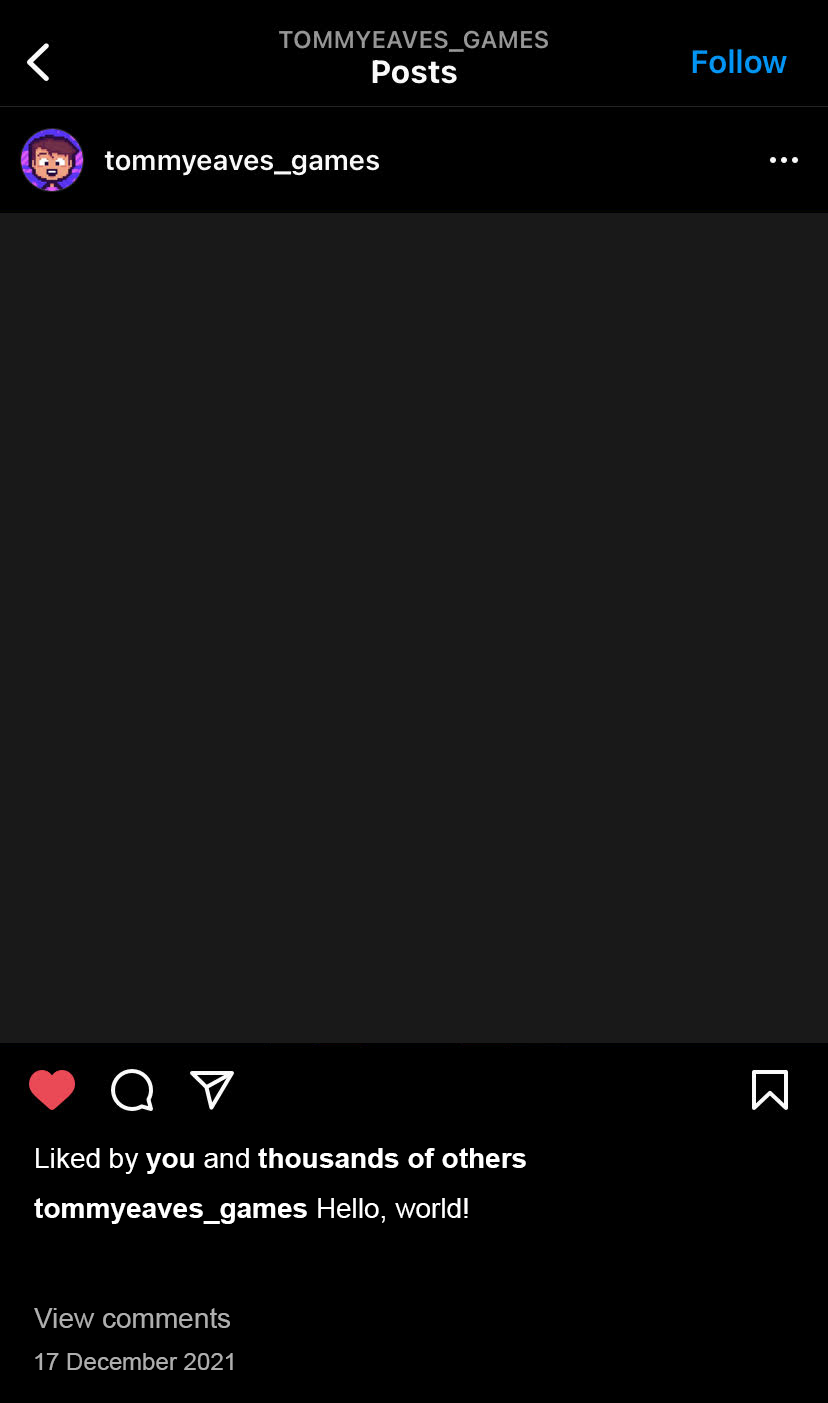
<style>
.page{position:relative;width:828px;height:1403px;background:#191919}
.page>*{position:absolute;margin:0}
.t1{font:28px "Arial-BoldMT";color:#ffffff}
.t2{font:28px "ArialMT";color:#ffffff}
.t3{font:28px "ArialMT";color:#aeaeae}
.t4{font:24px "ArialMT";color:#aeaeae}
</style>
<div class="page">
<p class="t1" style="left:36px;top:1148px;width:490px;height:26px"><span class="t2">Liked by </span>you <span class="t2">and </span>thousands of others</p>
<p class="t1" style="left:34px;top:1198px;width:434px;height:26px">tommyeaves_games<span class="t2"> Hello, world!</span></p>
<p class="t3" style="left:34px;top:1308px;width:196px;height:20px">View comments</p>
<p class="t4" style="left:35px;top:1353px;width:198px;height:17px">17 December 2021</p>
</div>
